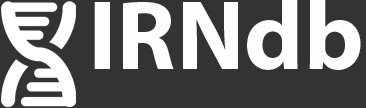
<style>
.page{position:relative;width:366px;height:108px;background:#333333}
.page>*{position:absolute;margin:0}
.t1{font:100px "MyriadPro-Bold";color:#fefefe}
</style>
<div class="page">
<p class="t1" style="left:94px;top:0px;width:267px;height:70px">IRNdb</p>
</div>
